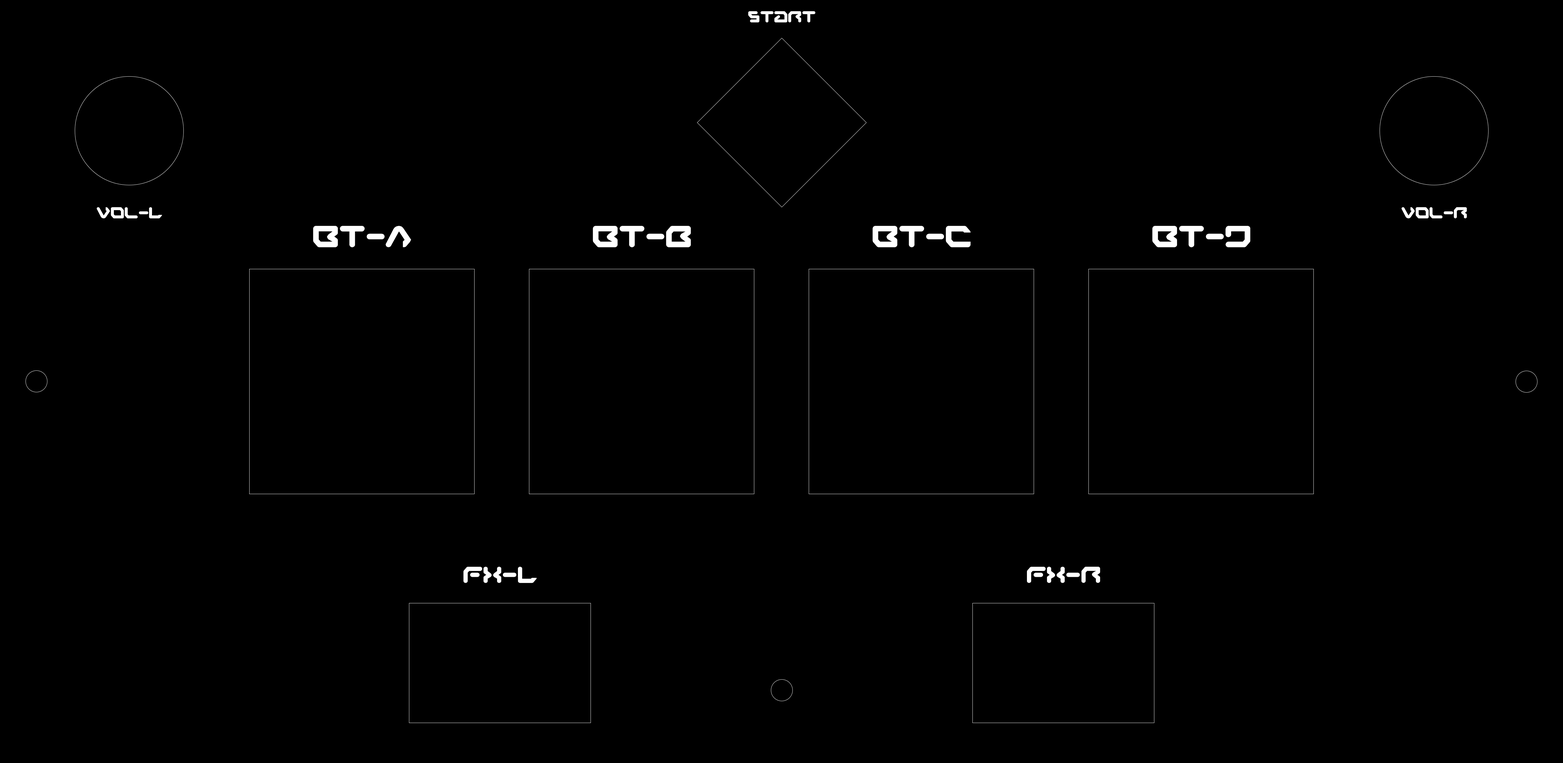
<style>
.page{position:relative;width:1563px;height:763px;background:#000000}
.page>*{position:absolute;margin:0}
.t1{font:15.4px "AirstripOne";color:#ffffff}
.t2{font:29.5px "AirstripOne";color:#ffffff}
.t3{font:22.3px "AirstripOne";color:#ffffff}
</style>
<div class="page">
<p class="t1" style="left:748px;top:11px;width:67px;height:11px">Start</p>
<p class="t1" style="left:97px;top:207px;width:65px;height:11px">Vol-L</p>
<p class="t1" style="left:1401px;top:207px;width:66px;height:11px">Vol-r</p>
<p class="t2" style="left:313px;top:226px;width:98px;height:21px">bt-A</p>
<p class="t2" style="left:593px;top:226px;width:98px;height:21px">bt-B</p>
<p class="t2" style="left:872px;top:226px;width:98px;height:21px">bt-C</p>
<p class="t2" style="left:1152px;top:226px;width:98px;height:21px">bt-D</p>
<p class="t3" style="left:463px;top:567px;width:74px;height:16px">FX-L</p>
<p class="t3" style="left:1027px;top:567px;width:73px;height:16px">FX-r</p>
</div>
